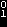
<style>
.page{position:relative;width:7px;height:27px;background:#000000}
.page>*{position:absolute;margin:0}
.t1{font:11px "CourierNewPSMT";color:#ffffff}
</style>
<div class="page">
<p class="t1" style="left:1px;top:1px;width:5px;height:16px">0<br>1</p>
</div>
